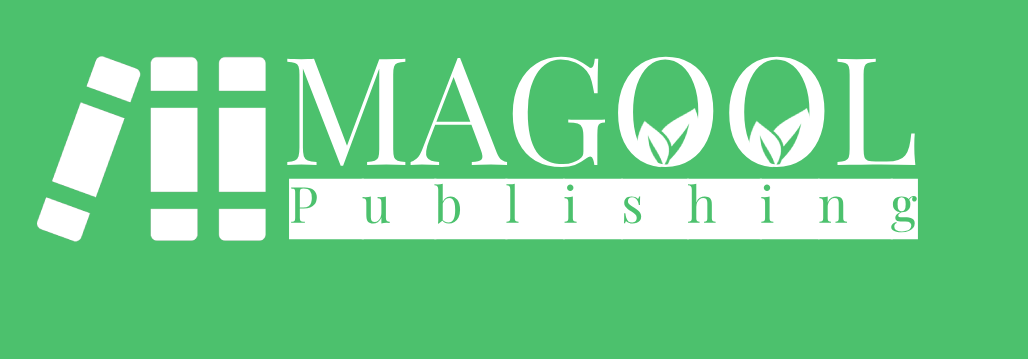
<style>
.page{position:relative;width:1028px;height:359px;background:#4cc16d}
.page>*{position:absolute;margin:0}
.t1{font:150px "PlayfairDisplay-Regular";color:#ffffff}
.t2{font:50px "PlayfairDisplay-Regular";letter-spacing:0.869em;color:#ffffff}
</style>
<div class="page">
<p class="t1" style="left:287px;top:56px;width:629px;height:112px">MAGOOL</p>
<p class="t2" style="left:289px;top:178px;width:629px;height:62px">Publishing</p>
</div>
